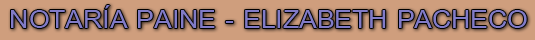
<style>
.page{position:relative;width:535px;height:40px;background:#cf9e7d}
.page>*{position:absolute;margin:0}
.t1{font:38px "BrowalliaUPC";color:#817bc7;scale:1.07 1}
</style>
<div class="page">
<p class="t1" style="left:11px;top:5px;width:516px;height:23px">NOTARÍA PAINE - ELIZABETH PACHECO</p>
</div>
